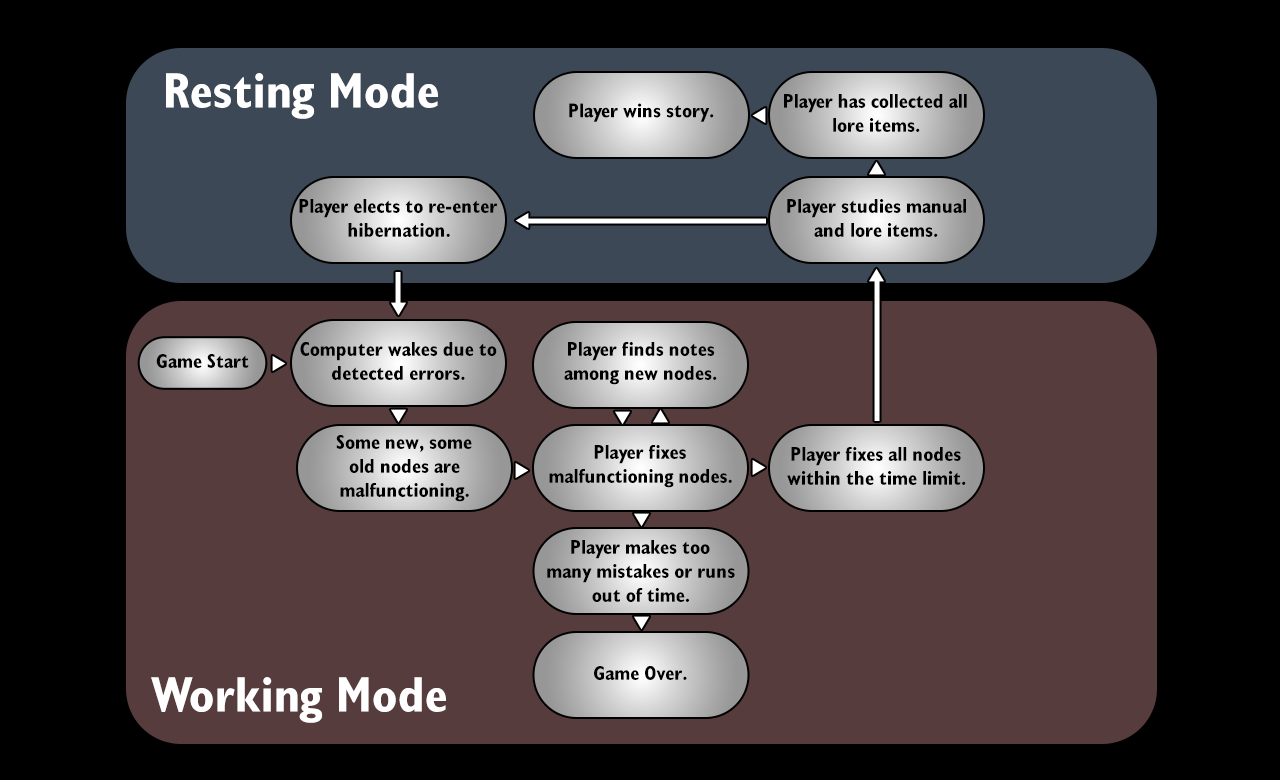
<style>
.page{position:relative;width:1280px;height:780px;background:#000000}
.page>*{position:absolute;margin:0}
.t1{font:50px "TGL12096.01";color:#ffffff}
.t2{font:20px "TGL12096.01";color:#000000}
</style>
<div class="page">
<p class="t1" style="left:166px;top:73px;width:272px;height:46px">Resting Mode</p>
<p class="t2" style="left:784px;top:94px;width:183px;height:38px;text-align:center">Player has collected all lore items.</p>
<p class="t2" style="left:569px;top:103px;width:145px;height:19px">Player wins story.</p>
<p class="t2" style="left:299px;top:199px;width:199px;height:38px;text-align:center">Player elects to re-enter hibernation.</p>
<p class="t2" style="left:787px;top:199px;width:179px;height:38px;text-align:center">Player studies manual and lore items.</p>
<p class="t2" style="left:300px;top:342px;width:197px;height:38px;text-align:center">Computer wakes due to detected errors.</p>
<p class="t2" style="left:564px;top:342px;width:153px;height:43px;text-align:center">Player finds notes among new nodes.</p>
<p class="t2" style="left:156px;top:354px;width:93px;height:14px">Game Start</p>
<p class="t2" style="left:336px;top:435px;width:136px;height:67px;text-align:center">Some new, some <br>old nodes are malfunctioning.</p>
<p class="t2" style="left:549px;top:445px;width:183px;height:43px;text-align:center">Player fixes malfunctioning nodes.</p>
<p class="t2" style="left:787px;top:447px;width:179px;height:38px;text-align:center">Player fixes all nodes within the time limit.</p>
<p class="t2" style="left:547px;top:540px;width:188px;height:62px;text-align:center">Player makes too <br>many mistakes or runs out of time.</p>
<p class="t1" style="left:151px;top:677px;width:295px;height:46px">Working Mode</p>
<p class="t2" style="left:594px;top:666px;width:93px;height:14px">Game Over.</p>
</div>
